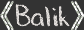
<style>
.page{position:relative;width:84px;height:30px;background:#333333}
.page>*{position:absolute;margin:0}
.t1{font:28px "DJBChalkItUp";color:#d5d1cf}
</style>
<div class="page">
<p class="t1" style="left:15px;top:4px;width:55px;height:23px">Balik</p>
</div>
